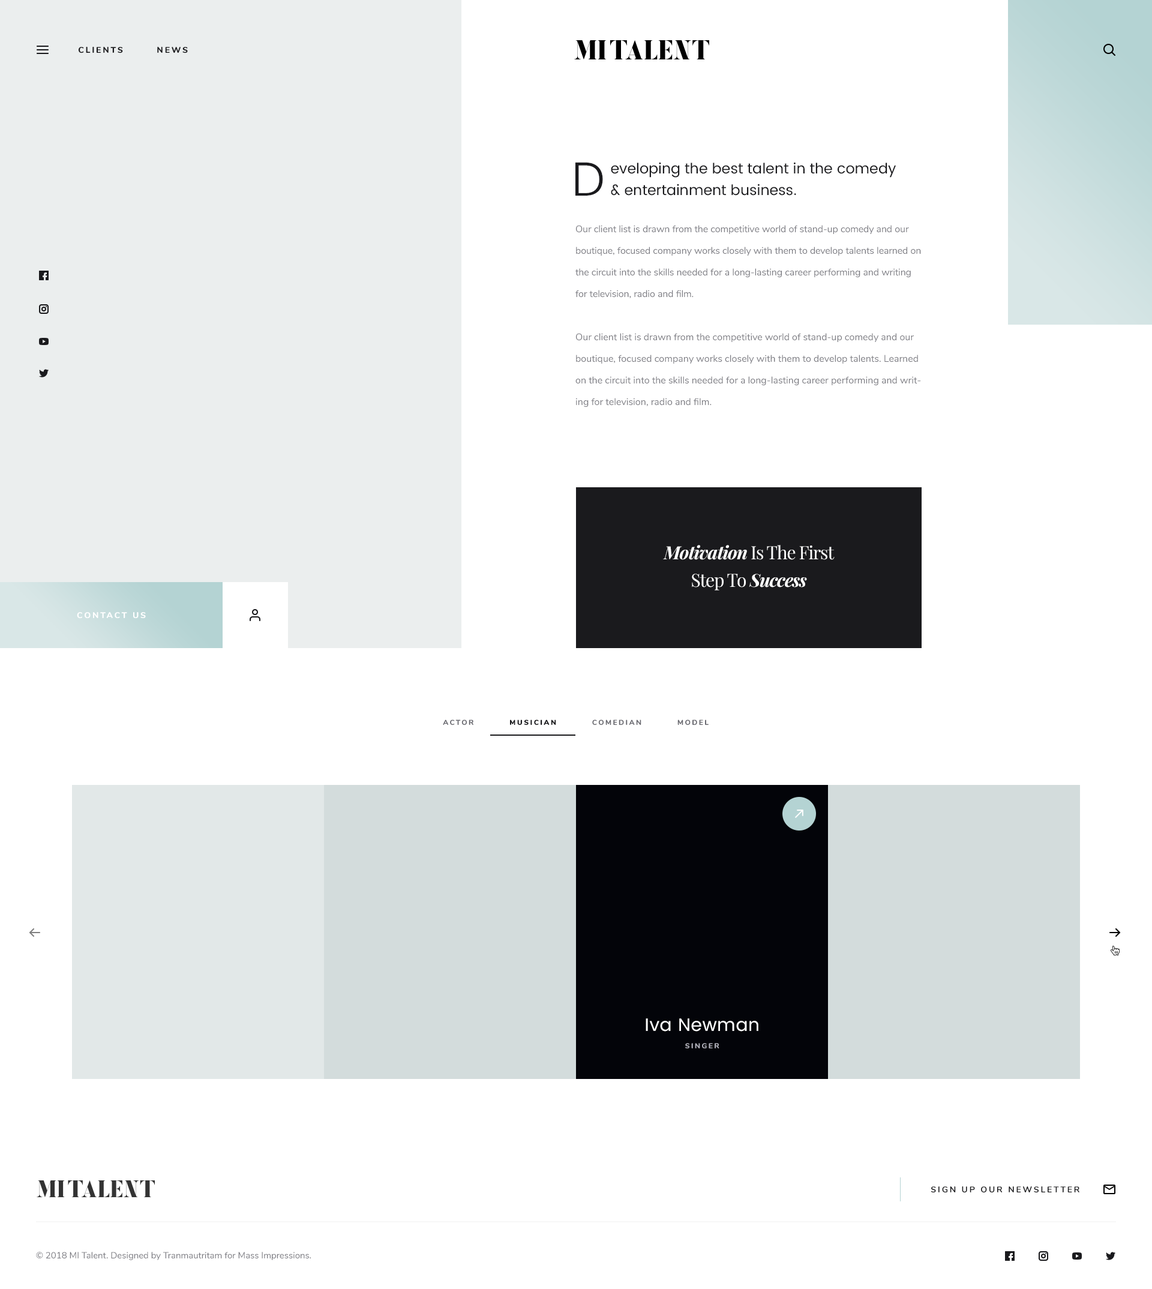
<style>
.page{position:relative;width:1152px;height:1289px;background:#ffffff}
.page>*{position:absolute;margin:0}
.t1{font:8.4px "Nunito-ExtraBold";letter-spacing:0.2em;color:#1a1a1d;text-transform:uppercase}
.t2{font:48px "Poppins-Light";color:#1a1a1d}
.t3{font:14.4px/21.6px "Poppins-Regular";color:#1a1a1d}
.t4{font:9.6px/21.6px "Nunito-Regular";color:#77777e}
.t5{font:18px/27.6px "PlayfairDisplay-Regular";letter-spacing:-0.04em;color:#ffffff}
.t6{font:18px/27.6px "PlayfairDisplay-BoldItalic";letter-spacing:-0.04em;color:#ffffff}
.t7{font:8.4px "Nunito-ExtraBold";letter-spacing:0.2em;color:#ffffff;text-transform:uppercase}
.t8{font:7.2px "Nunito-ExtraBold";letter-spacing:0.2em;color:#696970;text-transform:uppercase}
.t9{font:7.2px "Nunito-Black";letter-spacing:0.2em;color:#1a1a1d;text-transform:uppercase}
.t10{font:18px "Poppins-Regular";letter-spacing:0.02em;color:#ffffff}
.t11{font:7.2px "Nunito-ExtraBold";letter-spacing:0.2em;color:#aeaeb7;text-transform:uppercase}
.t12{font:8.4px "Nunito-Bold";letter-spacing:0.2em;color:#1a1a1d;text-transform:uppercase}
.t13{font:9px "Nunito-Regular";color:#77777e}
</style>
<div class="page">
<p class="t1" style="left:79px;top:47px;width:109px;height:6px">Clients        News</p>
<p class="t2" style="left:575px;top:162px;width:28px;height:34px">D</p>
<p class="t3" style="left:611px;top:162px;width:285px;height:34px">eveloping the best talent in the comedy<br>&amp; entertainment business.</p>
<p class="t4" style="left:575px;top:225px;width:346px;height:182px">Our client list is drawn from the competitive world of stand-up comedy and our boutique, focused company works closely with them to develop talents learned on the circuit into the skills needed for a long-lasting career performing and writing for television, radio and film.<br><br>Our client list is drawn from the competitive world of stand-up comedy and our boutique, focused company works closely with them to develop talents. Learned on the circuit into the skills needed for a long-lasting career performing and writing for television, radio and film.<br><br>Chambers Management’s artists are available for castings and read-throughs for acting roles for television, film and stage. Our acts’ comedic skills, combined with a variety of stage experience, put them in good stead for both comedic and non-comedic roles. If you are looking to cast one of our acts, please give us a call or email our casting address.</p>
<p class="t5" style="left:663px;top:545px;width:172px;height:45px;text-align:center"><span class="t6">Motivation</span> Is The First Step To <span class="t6">Success</span></p>
<p class="t7" style="left:77px;top:612px;width:69px;height:7px">contact us</p>
<p class="t8" style="left:443px;top:719px;width:266px;height:6px">Actor          <span class="t9">Musician</span>          Comedian          Model</p>
<p class="t10" style="left:646px;top:1018px;width:112px;height:13px">Iva Newman</p>
<p class="t11" style="left:685px;top:1043px;width:34px;height:5px">singer</p>
<p class="t12" style="left:931px;top:1186px;width:148px;height:7px">sign up our newsletter</p>
<p class="t13" style="left:36px;top:1252px;width:275px;height:8px">© 2018 MI Talent. Designed by Tranmautritam for Mass Impressions.</p>
</div>
